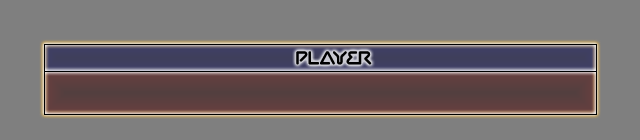
<style>
.page{position:relative;width:640px;height:140px;background:#7f7f7f}
.page>*{position:absolute;margin:0}
.t1{font:20px "Chilopod-Regular";color:#000000}
</style>
<div class="page">
<p class="t1" style="left:296px;top:51px;width:76px;height:14px">Player</p>
</div>
